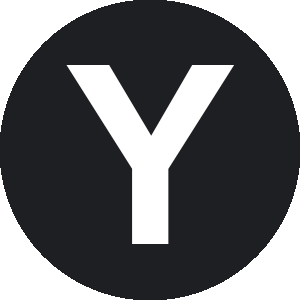
<style>
.page{position:relative;width:300px;height:300px;background:#1e1f23}
.page>*{position:absolute;margin:0}
.t1{font:250px "Arial-BoldMT";color:#ffffff}
</style>
<div class="page">
<p class="t1" style="left:66px;top:65px;width:168px;height:179px">Y</p>
</div>
